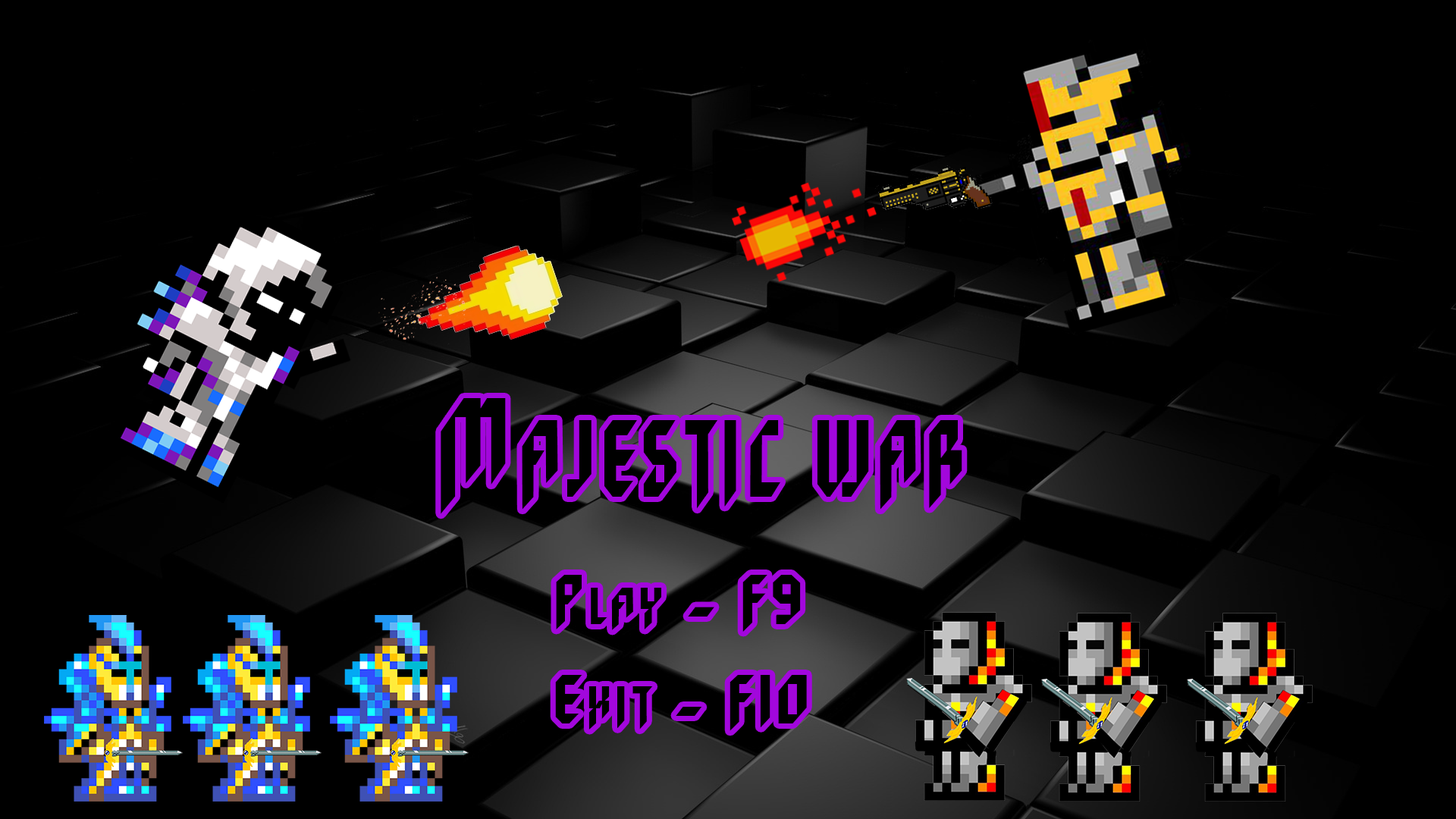
<style>
.page{position:relative;width:1456px;height:819px;background:#000000}
.page>*{position:absolute;margin:0}
.t1{font:108.9px "Cyberwar-Regular";letter-spacing:0.12em;color:#000000;scale:0.64 1}
.t2{font:140.9px "Cyberwar-Regular";letter-spacing:0.12em;color:#000000;scale:0.64 1}
.t3{font:70.8px "Cyberwar-Regular";letter-spacing:0.12em;color:#000000;scale:0.81 1}
.t4{font:51.9px "Cyberwar-Regular";letter-spacing:0.12em;color:#000000;scale:0.81 1}
.t5{font:69.7px "Cyberwar-Regular";letter-spacing:0.12em;color:#000000;scale:0.81 1}
.t6{font:52.7px "Cyberwar-Regular";letter-spacing:0.12em;color:#000000;scale:0.81 1}
</style>
<div class="page">
<p class="t1" style="left:441px;top:398px;width:521px;height:116px"><span class="t2">M</span>ajestic war</p>
<p class="t3" style="left:556px;top:575px;width:245px;height:57px">P<span class="t4">lay</span> - F9</p>
<p class="t5" style="left:555px;top:675px;width:252px;height:56px">E<span class="t6">xit</span> - F10</p>
</div>
